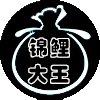
<style>
.page{position:relative;width:100px;height:100px;background:#000000}
.page>*{position:absolute;margin:0}
.t1{font:21.1px/26.3px "STCaiyun";letter-spacing:0.075em;color:#ffffff}
</style>
<div class="page">
<p class="t1" style="left:27px;top:37px;width:43px;height:48px">锦鲤<br>大王</p>
</div>
